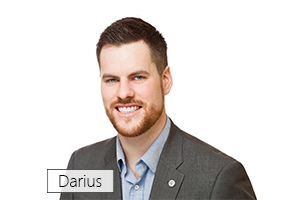
<style>
.page{position:relative;width:300px;height:200px;background:#ffffff}
.page>*{position:absolute;margin:0}
.t1{font:16.7px "SegoeUI-Light";color:#000000}
</style>
<div class="page">
<p class="t1" style="left:59px;top:175px;width:43px;height:12px">Darius</p>
</div>
